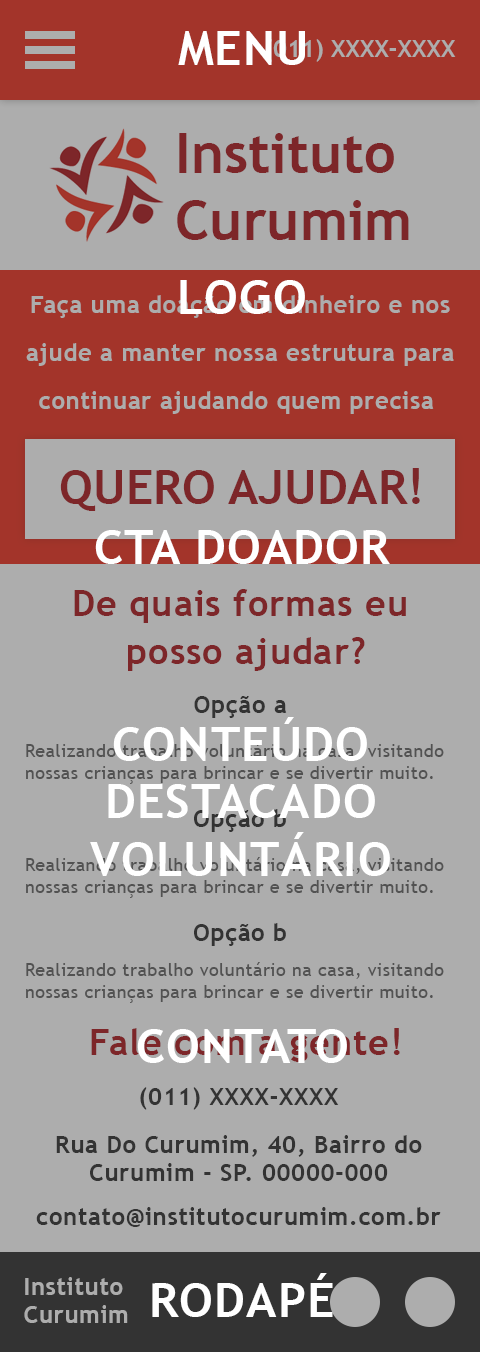
<style>
.page{position:relative;width:480px;height:1352px;background:#adadad}
.page>*{position:absolute;margin:0}
.t1{font:48px "TrebuchetMS-Bold";letter-spacing:0.025em;color:#ffffff}
.t2{font:24px "TrebuchetMS-Bold";color:#adadad}
.t3{font:56px "TrebuchetMS-Bold";color:#7d2629}
.t4{font:24px/48px "TrebuchetMS-Bold";letter-spacing:0.025em;color:#adadad}
.t5{font:48px "TrebuchetMS-Bold";color:#7d2629;text-transform:uppercase}
.t6{font:36px/48px "TrebuchetMS-Bold";letter-spacing:0.025em;color:#7d2629}
.t7{font:24px "TrebuchetMS-Bold";letter-spacing:0.025em;color:#333333}
.t8{font:18px "TrebuchetMS";letter-spacing:0.025em;color:#666666}
.t9{font:36px "TrebuchetMS-Bold";letter-spacing:0.025em;color:#7d2629}
.t10{font:24px "TrebuchetMS-Bold";letter-spacing:0.025em;color:#adadad}
</style>
<div class="page">
<p class="t1" style="left:178px;top:31px;width:127px;height:34px">MENU</p>
<p class="t2" style="left:265px;top:39px;width:191px;height:23px">(011) XXXX-XXXX</p>
<p class="t3" style="left:177px;top:133px;width:232px;height:107px">Instituto<br>Curumim</p>
<p class="t1" style="left:180px;top:280px;width:125px;height:34px">LOGO</p>
<p class="t4" style="left:26px;top:295px;width:428px;height:119px;text-align:center">Faça uma doação em dinheiro e nos<br>ajude a manter nossa estrutura para<br>continuar ajudando quem precisa</p>
<p class="t5" style="left:60px;top:468px;width:360px;height:43px">Quero ajudar!</p>
<p class="t1" style="left:95px;top:530px;width:295px;height:34px">CTA DOADOR</p>
<p class="t6" style="left:74px;top:589px;width:332px;height:82px;text-align:center">De quais formas eu <br>posso ajudar?</p>
<p class="t7" style="left:194px;top:696px;width:93px;height:22px">Opção a</p>
<p class="t1" style="left:90px;top:717px;width:300px;height:159px;text-align:center">CONTEÚDO<br>DESTACADO<br>VOLUNTÁRIO</p>
<p class="t8" style="left:26px;top:743px;width:418px;height:41px">Realizando trabalho voluntário na casa, visitando<br>nossas crianças para brincar e se divertir muito.</p>
<p class="t7" style="left:194px;top:809px;width:92px;height:23px">Opção b</p>
<p class="t8" style="left:26px;top:857px;width:418px;height:41px">Realizando trabalho voluntário na casa, visitando<br>nossas crianças para brincar e se divertir muito.</p>
<p class="t7" style="left:194px;top:923px;width:92px;height:23px">Opção b</p>
<p class="t8" style="left:26px;top:962px;width:418px;height:41px">Realizando trabalho voluntário na casa, visitando<br>nossas crianças para brincar e se divertir muito.</p>
<p class="t9" style="left:91px;top:1028px;width:309px;height:34px">Fale com a gente!</p>
<p class="t1" style="left:137px;top:1029px;width:210px;height:34px">CONTATO</p>
<p class="t7" style="left:140px;top:1087px;width:199px;height:23px">(011) XXXX-XXXX</p>
<p class="t7" style="left:56px;top:1135px;width:366px;height:46px;text-align:center">Rua Do Curumim, 40, Bairro do<br>Curumim - SP. 00000-000</p>
<p class="t7" style="left:36px;top:1207px;width:405px;height:20px">contato@institutocurumim.com.br</p>
<p class="t10" style="left:24px;top:1277px;width:104px;height:46px">Instituto<br>Curumim</p>
<p class="t1" style="left:152px;top:1273px;width:181px;height:44px">RODAPÉ</p>
</div>
